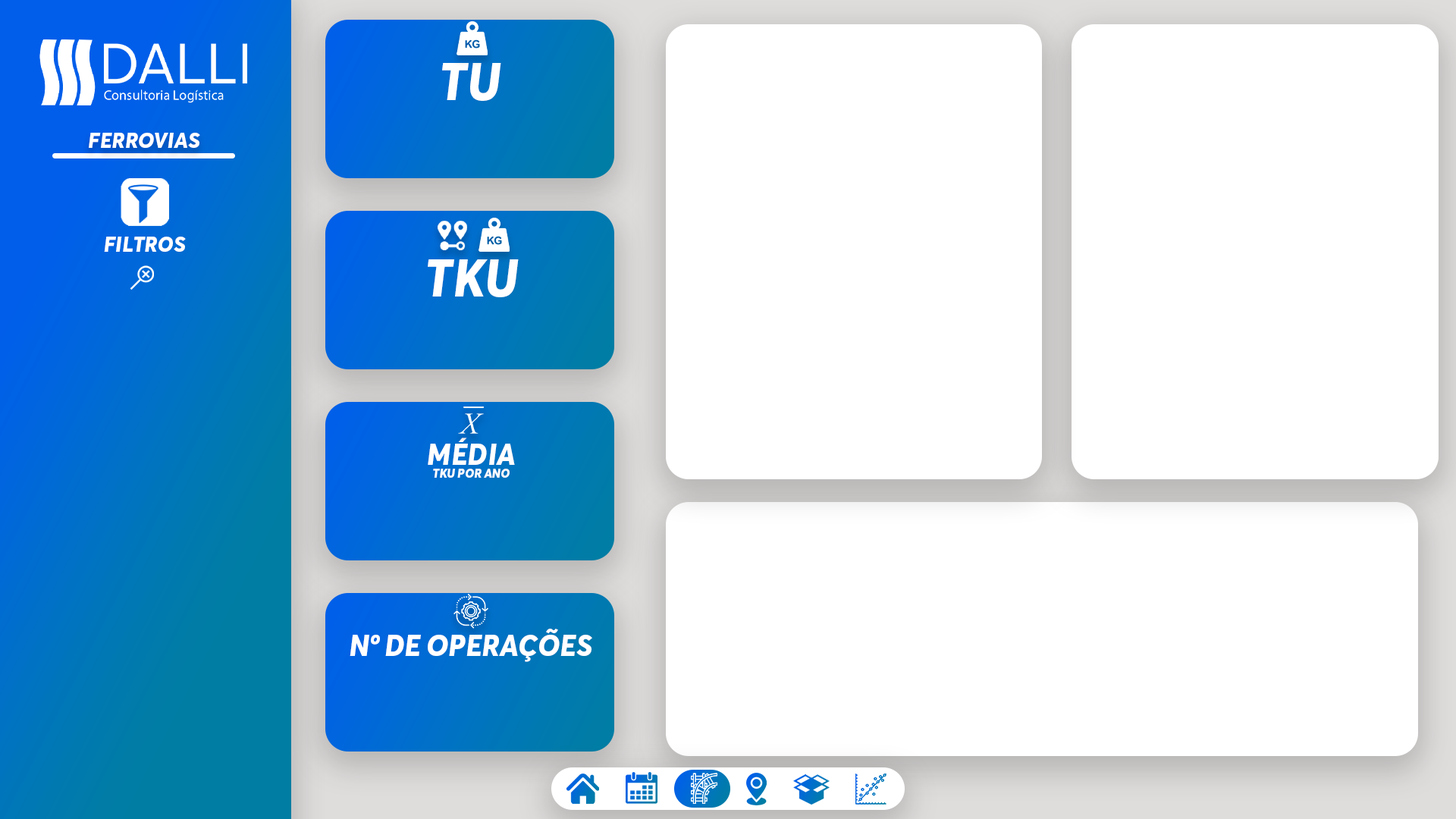
<style>
.page{position:relative;width:1456px;height:819px;background:#ffffff}
.page>*{position:absolute;margin:0}
.t1{font:52.1px "AvertaDemoPE-ExtraboldItalic";color:#ffffff;text-transform:uppercase}
.t2{font:22.1px "AvertaDemoPE-ExtraboldItalic";color:#ffffff;text-transform:uppercase}
.t3{font:12.6px/12.6px "AvertaDemoPE-ExtraboldItalic";color:#ffffff;text-transform:uppercase}
.t4{font:30px/12.6px "AvertaDemoPE-ExtraboldItalic";color:#ffffff;text-transform:uppercase}
.t5{font:30px/12.6px "AvertaDemoPE-ExtraboldItalic";color:#ffffff}
.t6{font:30px "AvertaDemoPE-ExtraboldItalic";color:#ffffff;text-transform:uppercase}
</style>
<div class="page">
<p class="t1" style="left:442px;top:63px;width:59px;height:38px">tu</p>
<p class="t2" style="left:89px;top:133px;width:111px;height:15px">FERROVIAS</p>
<p class="t2" style="left:104px;top:237px;width:82px;height:15px">filtros</p>
<p class="t1" style="left:428px;top:259px;width:91px;height:38px">tku</p>
<p class="t3" style="left:428px;top:438px;width:87px;height:40px;text-align:center"><span class="t4">méd</span><span class="t5">I</span><span class="t4">a<br></span>TKU por ano</p>
<p class="t6" style="left:350px;top:629px;width:242px;height:33px">nº de operações</p>
</div>
